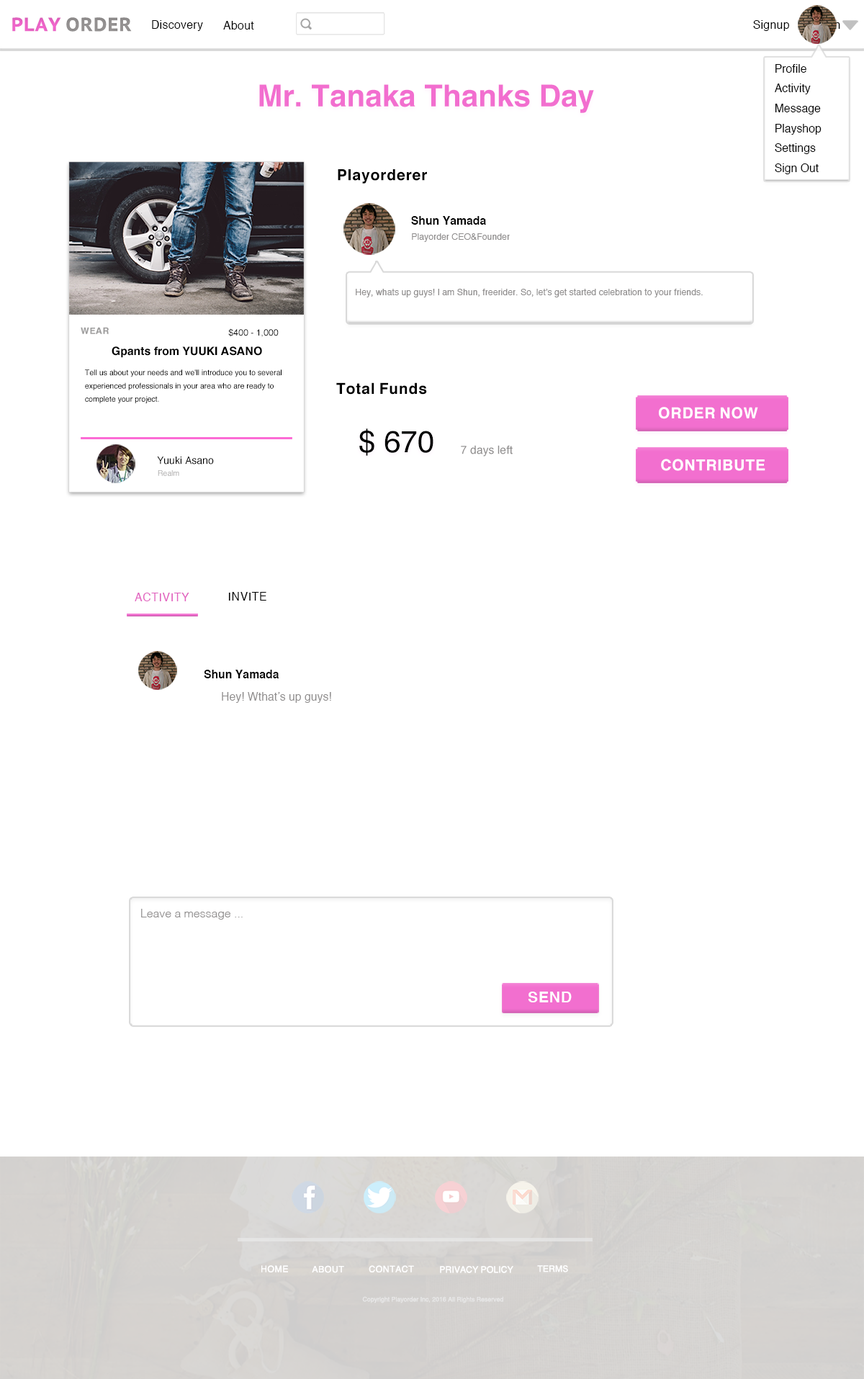
<style>
.page{position:relative;width:864px;height:1379px;background:#ffffff}
.page>*{position:absolute;margin:0}
.t1{font:19px "PTSans-CaptionBold";color:#9d9a9a}
.t2{font:19px "PTSans-CaptionBold";color:#fc6bd5}
.t3{font:11.4px "Helvetica";color:#000000}
.t4{font:30.4px "Helvetica-Bold";color:#f26ecf}
.t5{font:15.2px "Helvetica-Bold";color:#000000}
.t6{font:11.4px "Helvetica-Bold";color:#000000}
.t7{font:8.9px "Helvetica";color:#8f8d8d}
.t8{font:8.9px "Helvetica-Bold";color:#9c9b9b}
.t9{font:8.9px "Helvetica";color:#000000}
.t10{font:7.6px "Helvetica";color:#000000}
.t11{font:15.2px "Helvetica-Bold";color:#ffffff}
.t12{font:30.4px "Helvetica";color:#000000}
.t13{font:11.4px "Helvetica";color:#8f8d8d}
.t14{font:10.1px "Helvetica";color:#000000}
.t15{font:7.6px "Helvetica";color:#b0afaf}
.t16{font:11.4px "Helvetica";color:#eb64c7}
.t17{font:11.4px "Helvetica-Light";color:#8f8d8d}
.t18{font:8.9px "Helvetica";color:#ffffff}
.t19{font:6.3px "Helvetica";color:#e9e8e8}
</style>
<div class="page">
<p class="t1" style="left:12px;top:17px;width:120px;height:15px"><span class="t2">PLAY </span>ORDER</p>
<p class="t3" style="left:152px;top:20px;width:51px;height:11px">Discovery</p>
<p class="t3" style="left:223px;top:21px;width:31px;height:9px">About</p>
<p class="t3" style="left:753px;top:20px;width:37px;height:11px">Signup</p>
<p class="t3" style="left:775px;top:64px;width:47px;height:110px">Profile<br>Activity<br>Message<br>Playshop<br>Settings<br>Sign Out</p>
<p class="t4" style="left:259px;top:84px;width:335px;height:29px">Mr. Tanaka Thanks Day</p>
<p class="t5" style="left:338px;top:169px;width:89px;height:15px">Playorderer</p>
<p class="t6" style="left:411px;top:216px;width:75px;height:9px">Shun Yamada</p>
<p class="t7" style="left:412px;top:233px;width:98px;height:9px">Playorder CEO&amp;Founder</p>
<p class="t7" style="left:356px;top:289px;width:347px;height:9px">Hey, whats up guys! I am Shun, freerider. So, let’s get started celebration to your friends.</p>
<p class="t8" style="left:81px;top:327px;width:28px;height:7px">WEAR</p>
<p class="t9" style="left:228px;top:328px;width:51px;height:9px">$400 - 1,000</p>
<p class="t6" style="left:112px;top:346px;width:150px;height:12px">Gpants from YUUKI ASANO</p>
<p class="t10" style="left:85px;top:370px;width:197px;height:33px">Tell us about your needs and we'll introduce you to several experienced professionals in your area who are ready to complete your project.</p>
<p class="t5" style="left:336px;top:383px;width:91px;height:12px">Total Funds</p>
<p class="t11" style="left:659px;top:407px;width:100px;height:12px">ORDER NOW</p>
<p class="t12" style="left:359px;top:429px;width:75px;height:27px">$ 670</p>
<p class="t13" style="left:461px;top:445px;width:52px;height:12px">7 days left</p>
<p class="t14" style="left:157px;top:457px;width:57px;height:8px">Yuuki Asano</p>
<p class="t11" style="left:661px;top:459px;width:105px;height:12px">CONTRIBUTE</p>
<p class="t15" style="left:158px;top:470px;width:21px;height:6px">Realm</p>
<p class="t16" style="left:135px;top:593px;width:54px;height:8px">ACTIVITY</p>
<p class="t3" style="left:228px;top:592px;width:39px;height:9px">INVITE</p>
<p class="t6" style="left:204px;top:670px;width:75px;height:9px">Shun Yamada</p>
<p class="t13" style="left:222px;top:692px;width:109px;height:11px">Hey! Wthat’s up guys!</p>
<p class="t17" style="left:141px;top:909px;width:102px;height:11px">Leave a message ...</p>
<p class="t11" style="left:528px;top:992px;width:44px;height:11px">SEND</p>
<p class="t18" style="left:261px;top:1266px;width:27px;height:7px">HOME</p>
<p class="t18" style="left:312px;top:1266px;width:32px;height:8px">ABOUT</p>
<p class="t18" style="left:369px;top:1266px;width:45px;height:7px">CONTACT</p>
<p class="t18" style="left:537px;top:1266px;width:31px;height:7px">TERMS</p>
<p class="t18" style="left:440px;top:1266px;width:74px;height:8px">PRIVACY POLICY</p>
<p class="t19" style="left:362px;top:1297px;width:142px;height:7px">Copyright Playorder Inc, 2016 All Rights Reserved</p>
</div>
